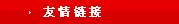
<style>
.page{position:relative;width:179px;height:24px;background:#d60000}
.page>*{position:absolute;margin:0}
.t1{font:12px "NSimSun";letter-spacing:0.2em;color:#ffffff;font-weight:bold}
</style>
<div class="page">
<p class="t1" style="left:43px;top:6px;width:58px;height:11px">友情链接</p>
</div>
